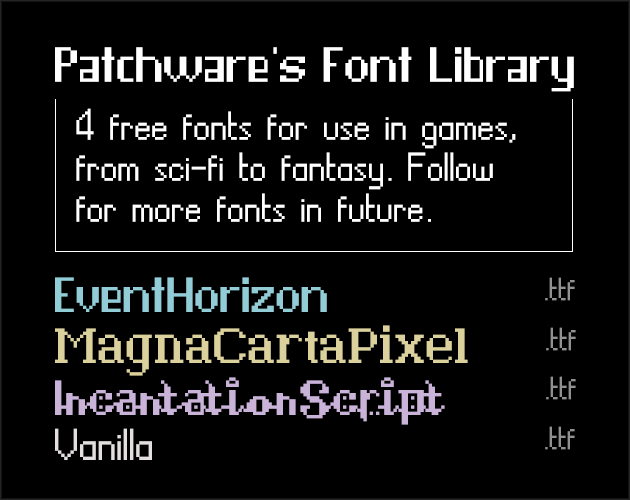
<style>
.page{position:relative;width:630px;height:500px;background:#000000}
.page>*{position:absolute;margin:0}
.t1{font:50px "EventHorizon";color:#ffffff}
.t2{font:45px/41px "Vanilla";color:#ffffff}
.t3{font:50px "EventHorizon";color:#92ccd7}
.t4{font:36px "Vanilla";color:#919191}
.t5{font:50px "MagnacartaPixel";color:#dbd19c}
.t6{font:50px "IncantationScrip";letter-spacing:0.1em;color:#cab3d8}
.t7{font:50px "Vanilla";color:#e3dfdf}
</style>
<div class="page">
<p class="t1" style="left:55px;top:47px;width:519px;height:45px">Patchware's Font Library</p>
<p class="t2" style="left:76px;top:108px;width:440px;height:114px">4 free fonts for use in games, from sci-fi to fantasy. Follow for more fonts in future.</p>
<p class="t3" style="left:55px;top:277px;width:272px;height:35px">EventHorizon</p>
<p class="t4" style="left:545px;top:277px;width:30px;height:24px">.ttf</p>
<p class="t5" style="left:55px;top:325px;width:413px;height:51px">MagnaCartaPixel</p>
<p class="t4" style="left:546px;top:327px;width:30px;height:24px">.ttf</p>
<p class="t6" style="left:55px;top:377px;width:390px;height:48px">IncantationScript</p>
<p class="t4" style="left:546px;top:376px;width:30px;height:24px">.ttf</p>
<p class="t7" style="left:55px;top:428px;width:97px;height:32px">Vanilla</p>
<p class="t4" style="left:545px;top:426px;width:30px;height:24px">.ttf</p>
</div>
